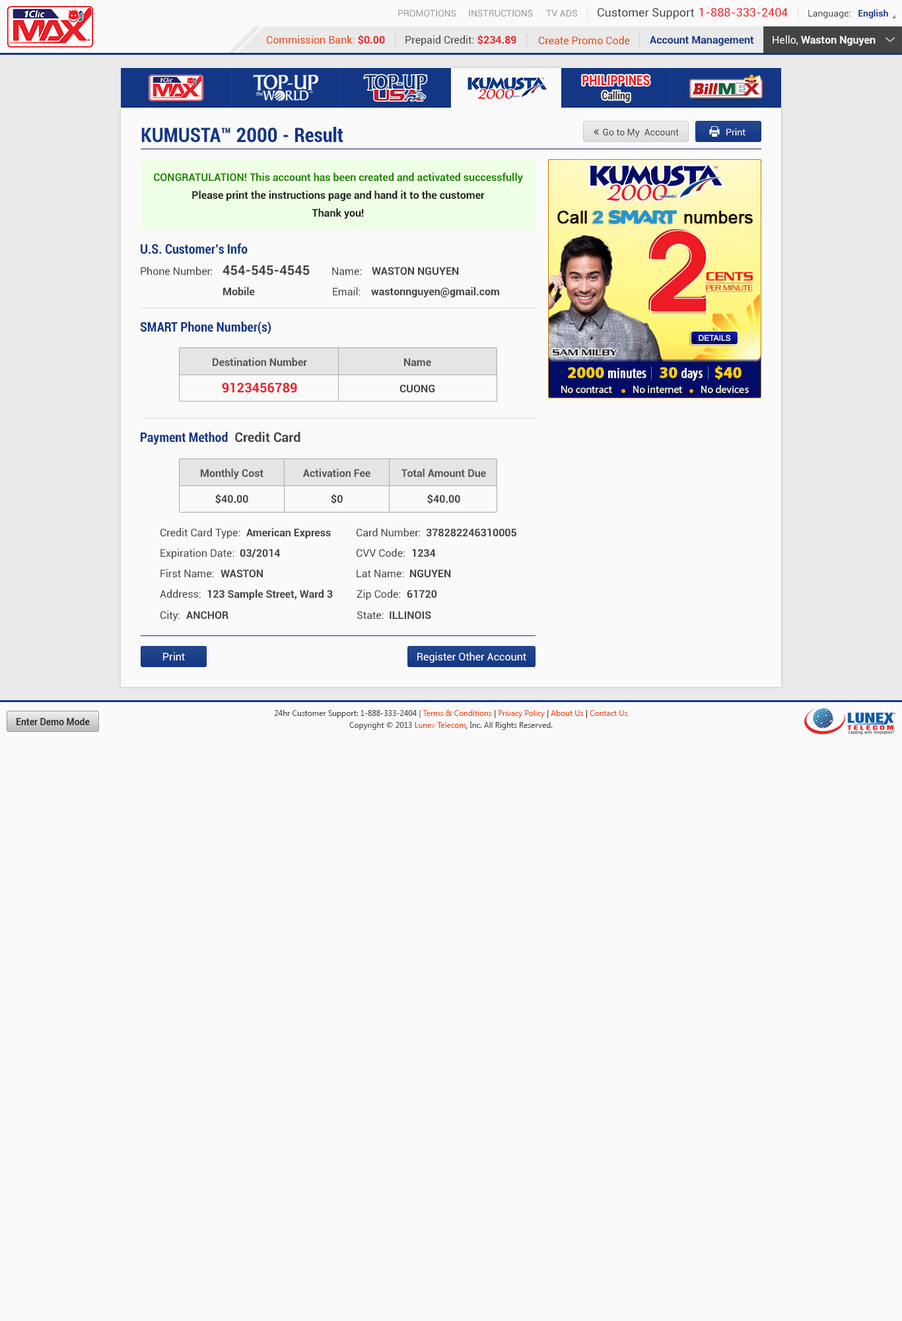
<style>
.page{position:relative;width:902px;height:1321px;background:#fafafa}
.page>*{position:absolute;margin:0}
.t1{font:9.2px "Roboto-Regular";color:#999999}
.t2{font:11.6px "Roboto-Regular";color:#444444}
.t3{font:11.6px "Roboto-Regular";color:#ec2029}
.t4{font:9.2px "Roboto-Regular";color:#444444}
.t5{font:9.2px "Roboto-Bold";color:#123785}
.t6{font:10.6px "Roboto-Regular";color:#ee4400}
.t7{font:10.6px "Roboto-Bold";color:#ec2028}
.t8{font:10.6px "Roboto-Regular";color:#444444}
.t9{font:10.6px "Roboto-Bold";color:#123785}
.t10{font:10.6px "Roboto-Bold";color:#fafafa}
.t11{font:10.6px "Roboto-Regular";color:#fafafa}
.t12{font:14.1px "Roboto-Black";color:#ec2028;scale:0.81 1}
.t13{font:11.3px "Roboto-Black";color:#333333;scale:0.81 1}
.t14{font:19.8px "Roboto-BoldCondensed";color:#123785}
.t15{font:13.2px "Roboto-Regular";color:#444444}
.t16{font:9.2px "Roboto-Regular";color:#fafafa}
.t17{font:10.6px "Roboto-Bold";color:#228800}
.t18{font:10.6px "Roboto-Bold";color:#222222}
.t19{font:13.2px "Roboto-BoldCondensed";color:#123785}
.t20{font:13.2px "Roboto-Bold";color:#444444}
.t21{font:10.6px "Roboto-Bold";color:#444444}
.t22{font:10.6px "Roboto-Bold";color:#555555}
.t23{font:13.2px "Roboto-Bold";color:#ec2028}
.t24{font:10.6px "Roboto-Regular";color:#ffffff}
.t25{font:7.9px/11.9px "SegoeUI";color:#444444}
.t26{font:7.9px/11.9px "SegoeUI";color:#ee4400}
.t27{font:7.9px/11.9px "SegoeUI";color:#333333}
.t28{font:9.2px "Roboto-Bold";color:#333333}
</style>
<div class="page">
<p class="t1" style="left:398px;top:10px;width:59px;height:7px">PROMOTIONS</p>
<p class="t1" style="left:469px;top:10px;width:64px;height:7px">INSTRUCTIONS</p>
<p class="t1" style="left:546px;top:10px;width:31px;height:7px">TV ADS</p>
<p class="t2" style="left:598px;top:8px;width:96px;height:11px">Customer Support</p>
<p class="t3" style="left:700px;top:8px;width:88px;height:9px">1-888-333-2404</p>
<p class="t4" style="left:809px;top:9px;width:80px;height:9px">Language:   <span class="t5">English</span></p>
<p class="t6" style="left:267px;top:35px;width:118px;height:10px">Commission Bank: <span class="t7">$0.00</span></p>
<p class="t8" style="left:406px;top:35px;width:111px;height:11px">Prepaid Credit: <span class="t7">$234.89</span></p>
<p class="t6" style="left:539px;top:36px;width:91px;height:9px">Create Promo Code</p>
<p class="t9" style="left:650px;top:36px;width:104px;height:10px">Account Management</p>
<p class="t10" style="left:773px;top:35px;width:103px;height:11px"><span class="t11">Hello, </span>Waston Nguyen</p>
<p class="t12" style="left:583px;top:75px;width:67px;height:11px">PHILIPPINES</p>
<p class="t13" style="left:603px;top:91px;width:27px;height:11px">Calling</p>
<p class="t14" style="left:141px;top:127px;width:203px;height:16px">KUMUSTA™ 2000 - Result</p>
<p class="t4" style="left:594px;top:129px;width:85px;height:8px"><span class="t15">« </span>Go to My  Account</p>
<p class="t16" style="left:727px;top:128px;width:19px;height:7px">Print</p>
<p class="t17" style="left:154px;top:172px;width:369px;height:12px">CONGRATULATION! This account has been created and activated successfully</p>
<p class="t18" style="left:192px;top:190px;width:293px;height:12px">Please print the instructions page and hand it to the customer</p>
<p class="t18" style="left:312px;top:208px;width:52px;height:11px">Thank you!</p>
<p class="t19" style="left:141px;top:243px;width:107px;height:11px">U.S. Customer’s Info</p>
<p class="t8" style="left:141px;top:266px;width:71px;height:9px">Phone Number:</p>
<p class="t20" style="left:223px;top:265px;width:87px;height:10px">454-545-4545</p>
<p class="t8" style="left:332px;top:267px;width:29px;height:8px">Name:</p>
<p class="t21" style="left:372px;top:267px;width:87px;height:8px">WASTON NGUYEN</p>
<p class="t21" style="left:223px;top:287px;width:32px;height:9px">Mobile</p>
<p class="t8" style="left:333px;top:287px;width:28px;height:9px">Email:</p>
<p class="t21" style="left:371px;top:287px;width:128px;height:11px">wastonnguyen@gmail.com</p>
<p class="t19" style="left:140px;top:321px;width:131px;height:13px">SMART Phone Number(s)</p>
<p class="t22" style="left:213px;top:357px;width:94px;height:10px">Destination Number</p>
<p class="t22" style="left:404px;top:358px;width:27px;height:9px">Name</p>
<p class="t23" style="left:222px;top:383px;width:75px;height:10px">9123456789</p>
<p class="t21" style="left:400px;top:385px;width:35px;height:7px">CUONG</p>
<p class="t19" style="left:141px;top:431px;width:160px;height:14px">Payment Method<span class="t20">  Credit Card</span></p>
<p class="t22" style="left:201px;top:468px;width:63px;height:12px">Monthly Cost</p>
<p class="t22" style="left:303px;top:468px;width:68px;height:10px">Activation Fee</p>
<p class="t22" style="left:402px;top:468px;width:84px;height:10px">Total Amount Due</p>
<p class="t21" style="left:215px;top:494px;width:33px;height:10px">$40.00</p>
<p class="t21" style="left:331px;top:494px;width:12px;height:10px">$0</p>
<p class="t21" style="left:427px;top:494px;width:33px;height:10px">$40.00</p>
<p class="t8" style="left:161px;top:528px;width:79px;height:11px">Credit Card Type:</p>
<p class="t21" style="left:246px;top:528px;width:85px;height:11px">American Express</p>
<p class="t8" style="left:357px;top:528px;width:63px;height:9px">Card Number:</p>
<p class="t21" style="left:426px;top:529px;width:91px;height:7px">378282246310005</p>
<p class="t8" style="left:161px;top:548px;width:74px;height:12px">Expiration Date:</p>
<p class="t21" style="left:240px;top:549px;width:40px;height:9px">03/2014</p>
<p class="t8" style="left:357px;top:548px;width:48px;height:9px">CVV Code:</p>
<p class="t21" style="left:412px;top:549px;width:24px;height:8px">1234</p>
<p class="t8" style="left:161px;top:569px;width:53px;height:9px">First Name:</p>
<p class="t21" style="left:221px;top:569px;width:42px;height:8px">WASTON</p>
<p class="t8" style="left:357px;top:569px;width:47px;height:9px">Lat Name:</p>
<p class="t21" style="left:410px;top:569px;width:41px;height:8px">NGUYEN</p>
<p class="t8" style="left:160px;top:589px;width:41px;height:9px">Address:</p>
<p class="t21" style="left:207px;top:589px;width:126px;height:12px">123 Sample Street, Ward 3</p>
<p class="t8" style="left:357px;top:589px;width:43px;height:12px">Zip Code:</p>
<p class="t21" style="left:407px;top:590px;width:30px;height:8px">61720</p>
<p class="t8" style="left:161px;top:610px;width:19px;height:12px">City:</p>
<p class="t21" style="left:186px;top:611px;width:43px;height:8px">ANCHOR</p>
<p class="t8" style="left:357px;top:611px;width:27px;height:9px">State:</p>
<p class="t21" style="left:390px;top:611px;width:41px;height:8px">ILLINOIS</p>
<p class="t24" style="left:163px;top:652px;width:22px;height:9px">Print</p>
<p class="t24" style="left:418px;top:652px;width:109px;height:11px">Register Other Account</p>
<p class="t25" style="left:274px;top:710px;width:354px;height:20px;text-align:center">24hr Customer Support: 1-888-333-2404 | <span class="t26">Terms &amp; Conditions</span><span class="t27"> | </span><span class="t26">Privacy Policy</span><span class="t27"> | </span><span class="t26">About Us</span><span class="t27"> | </span><span class="t26">Contact Us<br></span>Copyright © 2013 <span class="t26">Lunex Telecom</span><span class="t27">,</span> Inc. All Rights Reserved.</p>
<p class="t28" style="left:17px;top:718px;width:73px;height:7px">Enter Demo Mode</p>
</div>
